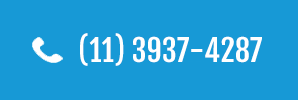
<style>
.page{position:relative;width:298px;height:100px;background:#1799d6}
.page>*{position:absolute;margin:0}
.t1{font:30px "FjallaOne";color:#ffffff;text-transform:uppercase}
</style>
<div class="page">
<p class="t1" style="left:80px;top:33px;width:182px;height:33px">(11) 3937-4287</p>
</div>
